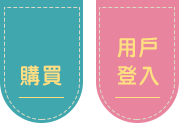
<style>
.page{position:relative;width:179px;height:123px;background:#3fa7ad}
.page>*{position:absolute;margin:0}
.t1{font:22px/28px "DFNYuan-MXB-HK-BF";letter-spacing:0.05em;color:#ffdf80;scale:0.95 1}
.t2{font:22px "DFNYuan-MXB-HK-BF";letter-spacing:0.05em;color:#ffdf80;scale:0.95 1}
</style>
<div class="page">
<p class="t1" style="left:117px;top:37px;width:42px;height:49px">用戶<br>登入</p>
<p class="t2" style="left:20px;top:65px;width:42px;height:21px">購買</p>
</div>
